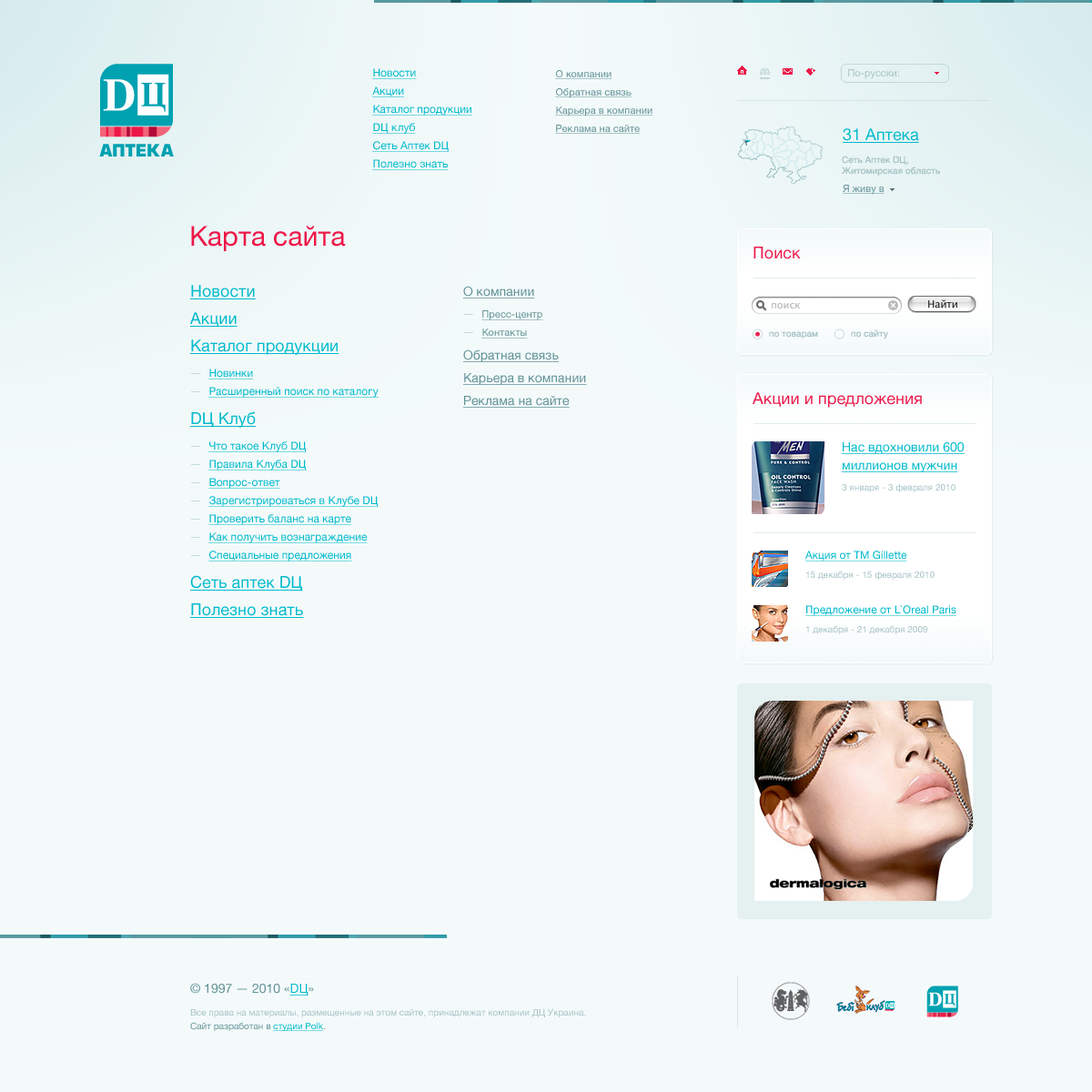
<style>
.page{position:relative;width:1092px;height:1092px;background:#f4fafa}
.page>*{position:absolute;margin:0}
.t1{font:10.9px "HelveticaNeue";color:#00bacc;text-decoration:underline}
.t2{font:10px "HelveticaNeue";color:#619196;text-decoration:underline}
.t3{font:10px "HelveticaNeue";color:#a6c2c5}
.t4{font:16.4px "HelveticaNeue";color:#00bacc;text-decoration:underline}
.t5{font:9.1px "HelveticaNeue";color:#a6c2c5}
.t6{font:27.3px "HelveticaNeue";color:#ed1848}
.t7{font:16.4px "HelveticaNeue";color:#ed1848}
.t8{font:12.7px "HelveticaNeue";color:#619196;text-decoration:underline}
.t9{font:10px "LucidaGrande";color:#000000}
.t10{font:12.7px/18.2px "HelveticaNeue";color:#00bacc;text-decoration:underline}
.t11{font:12.7px "HelveticaNeue";color:#619196}
.t12{font:12.7px "HelveticaNeue";color:#00bacc;text-decoration:underline}
.t13{font:9.1px "HelveticaNeue";color:#619196}
.t14{font:9.1px "HelveticaNeue";color:#00bacc;text-decoration:underline}
</style>
<div class="page">
<p class="t1" style="left:372px;top:68px;width:45px;height:11px">Новости</p>
<p class="t2" style="left:555px;top:70px;width:57px;height:9px">О компании</p>
<p class="t3" style="left:848px;top:69px;width:51px;height:10px">По-русски:</p>
<p class="t1" style="left:372px;top:86px;width:33px;height:11px">Акции</p>
<p class="t2" style="left:555px;top:88px;width:77px;height:10px">Обратная связь</p>
<p class="t1" style="left:372px;top:105px;width:100px;height:11px">Каталог продукции</p>
<p class="t2" style="left:555px;top:106px;width:98px;height:10px">Карьера в компании</p>
<p class="t1" style="left:372px;top:123px;width:44px;height:11px">DЦ клуб</p>
<p class="t2" style="left:555px;top:125px;width:85px;height:9px">Реклама на сайте</p>
<p class="t4" style="left:843px;top:128px;width:76px;height:15px">31 Аптека</p>
<p class="t1" style="left:372px;top:141px;width:78px;height:11px">Сеть Аптек DЦ</p>
<p class="t1" style="left:372px;top:159px;width:77px;height:11px">Полезно знать</p>
<p class="t5" style="left:841px;top:156px;width:99px;height:20px">Сеть Аптек DЦ,<br>Житомирская область</p>
<p class="t2" style="left:843px;top:185px;width:42px;height:10px">Я живу в</p>
<p class="t6" style="left:191px;top:226px;width:155px;height:25px">Карта сайта</p>
<p class="t7" style="left:753px;top:247px;width:48px;height:12px">Поиск</p>
<p class="t4" style="left:190px;top:285px;width:66px;height:14px">Новости</p>
<p class="t8" style="left:463px;top:286px;width:72px;height:12px">О компании</p>
<p class="t9" style="left:928px;top:299px;width:29px;height:9px">Найти</p>
<p class="t4" style="left:190px;top:312px;width:48px;height:15px">Акции</p>
<p class="t2" style="left:481px;top:310px;width:62px;height:10px">Пресс-центр</p>
<p class="t2" style="left:481px;top:329px;width:47px;height:10px">Контакты</p>
<p class="t5" style="left:851px;top:329px;width:37px;height:10px">по сайту</p>
<p class="t4" style="left:190px;top:339px;width:149px;height:16px">Каталог продукции</p>
<p class="t5" style="left:769px;top:331px;width:49px;height:8px">по товарам</p>
<p class="t8" style="left:463px;top:349px;width:96px;height:13px">Обратная связь</p>
<p class="t1" style="left:208px;top:369px;width:46px;height:10px">Новинки</p>
<p class="t8" style="left:463px;top:373px;width:124px;height:12px">Карьера в компании</p>
<p class="t1" style="left:208px;top:387px;width:171px;height:11px">Расширенный поиск по каталогу</p>
<p class="t8" style="left:463px;top:396px;width:107px;height:12px">Реклама на сайте</p>
<p class="t7" style="left:753px;top:392px;width:169px;height:16px">Акции и предложения</p>
<p class="t4" style="left:190px;top:411px;width:67px;height:17px">DЦ Клуб</p>
<p class="t1" style="left:208px;top:441px;width:99px;height:11px">Что такое Клуб DЦ</p>
<p class="t10" style="left:842px;top:442px;width:123px;height:30px">Нас вдохновили 600<br>миллионов мужчин</p>
<p class="t1" style="left:208px;top:460px;width:99px;height:10px">Правила Клуба DЦ</p>
<p class="t1" style="left:208px;top:478px;width:72px;height:11px">Вопрос-ответ</p>
<p class="t5" style="left:842px;top:483px;width:113px;height:9px">3 января - 3 февраля 2010</p>
<p class="t1" style="left:208px;top:496px;width:171px;height:11px">Зарегистрироваться в Клубе DЦ</p>
<p class="t1" style="left:208px;top:514px;width:143px;height:11px">Проверить баланс на карте</p>
<p class="t1" style="left:208px;top:532px;width:160px;height:11px">Как получить вознаграждение</p>
<p class="t1" style="left:208px;top:551px;width:144px;height:10px">Специальные предложения</p>
<p class="t1" style="left:805px;top:551px;width:102px;height:10px">Акция от ТМ Gillette</p>
<p class="t4" style="left:190px;top:575px;width:113px;height:16px">Сеть аптек DЦ</p>
<p class="t5" style="left:806px;top:571px;width:129px;height:9px">15 декабря - 15 февраля 2010</p>
<p class="t4" style="left:190px;top:603px;width:114px;height:15px">Полезно знать</p>
<p class="t1" style="left:805px;top:605px;width:151px;height:11px">Предложение от L`Oreal Paris</p>
<p class="t5" style="left:806px;top:625px;width:121px;height:9px">1 декабря - 21 декабря 2009</p>
<p class="t11" style="left:190px;top:983px;width:124px;height:13px">© 1997 — 2010 «<span class="t12">DЦ</span>»</p>
<p class="t5" style="left:190px;top:1008px;width:396px;height:9px">Все права на материалы, размещенные на этом сайте, принадлежат компании ДЦ Украина.</p>
<p class="t13" style="left:190px;top:1022px;width:135px;height:9px">Сайт разработан в <span class="t14">студии Polk</span>.</p>
</div>
